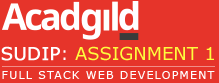
<style>
.page{position:relative;width:219px;height:83px;background:#e6342a}
.page>*{position:absolute;margin:0}
.t1{font:18px "Verdana";color:#fefc3d;text-transform:uppercase}
.t2{font:18px "Verdana";color:#ffffff;text-transform:uppercase;font-weight:bold}
.t3{font:18px "Verdana";color:#ffffff;text-transform:uppercase}
.t4{font:11px "Verdana";letter-spacing:0.11em;color:#ffffff;text-transform:uppercase}
</style>
<div class="page">
<p class="t1" style="left:1px;top:46px;width:213px;height:15px"><span class="t2">SUDIP</span><span class="t3">: </span>ASSIGNMENT 1</p>
<p class="t4" style="left:2px;top:71px;width:213px;height:8px">Full Stack Web Development</p>
</div>
